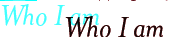
<style>
.page{position:relative;width:192px;height:37px;background:#ffffff}
.page>*{position:absolute;margin:0}
.t1{font:33.3px "MrsEavesItalic";color:#40ffff}
</style>
<div class="page">
<p class="t1" style="left:1px;top:4px;width:98px;height:22px">Who I am</p>
</div>
